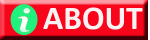
<style>
.page{position:relative;width:150px;height:40px;background:#f8051c}
.page>*{position:absolute;margin:0}
.t1{font:33.3px "Calibri-Bold";color:#f9f2f3}
</style>
<div class="page">
<p class="t1" style="left:43px;top:7px;width:100px;height:23px">ABOUT</p>
</div>
